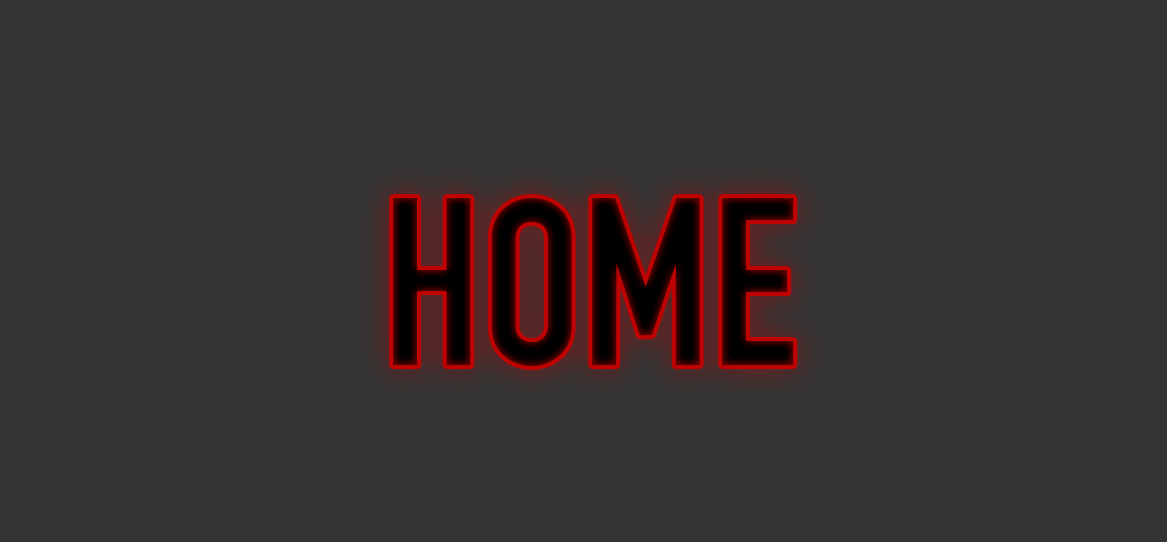
<style>
.page{position:relative;width:1167px;height:542px;background:#333333}
.page>*{position:absolute;margin:0}
.t1{font:233.7px "DINEngschrift"}
</style>
<div class="page">
<p class="t1" style="left:393px;top:198px;width:401px;height:168px">HOME</p>
</div>
